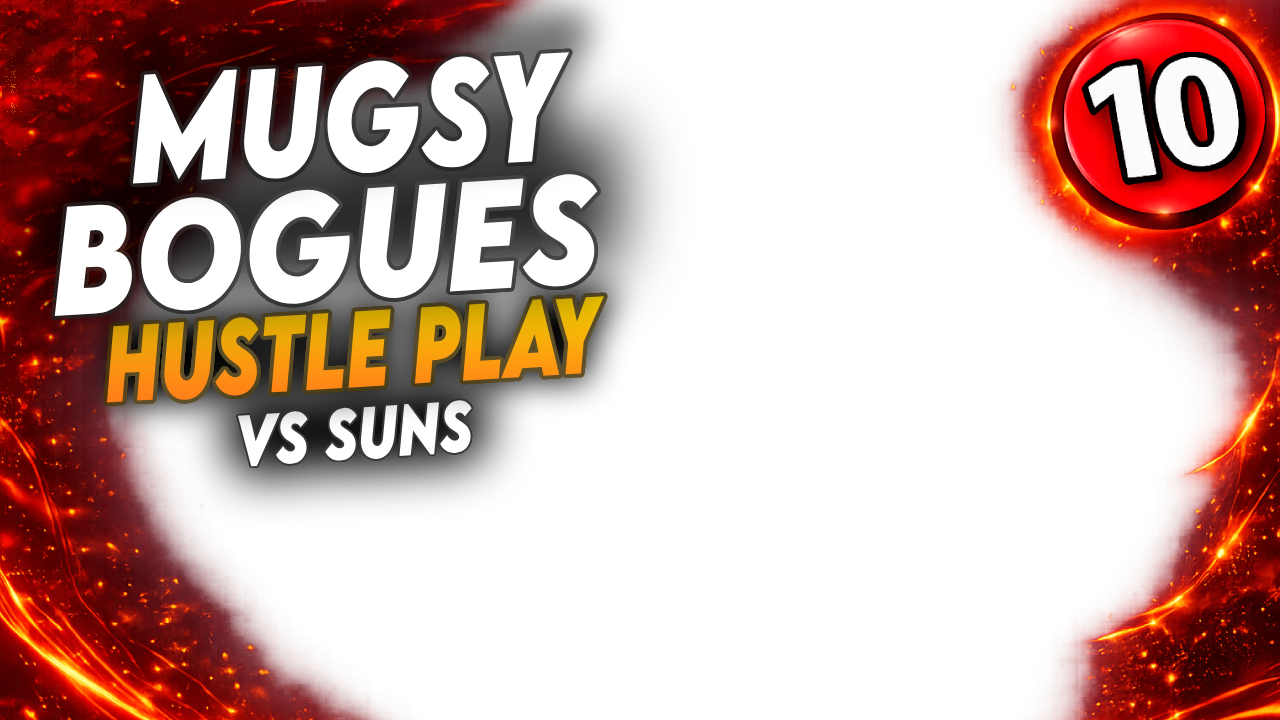
<style>
.page{position:relative;width:1280px;height:720px;background:#ffffff}
.page>*{position:absolute;margin:0}
.t1{font:136px "LEMONMILK-BoldItalic";color:#ffffff;scale:0.83 1}
.t2{font:137.6px "LEMONMILK-BoldItalic";color:#ffffff;scale:0.91 1}
.t3{font:96.1px "LEMONMILK-BoldItalic";scale:0.76 1}
.t4{font:64.7px "LEMONMILK-BoldItalic";color:#ffffff;scale:0.82 1}
</style>
<div class="page">
<p class="t1" style="left:132px;top:52px;width:438px;height:132px;rotate:-3deg">mugsy</p>
<p class="t2" style="left:54px;top:173px;width:544px;height:144px;rotate:-4deg">bogues</p>
<p class="t3" style="left:106px;top:296px;width:498px;height:107px;rotate:-4deg">hustle play</p>
<p class="t4" style="left:237px;top:399px;width:235px;height:68px;rotate:-4deg">vs suns</p>
</div>
